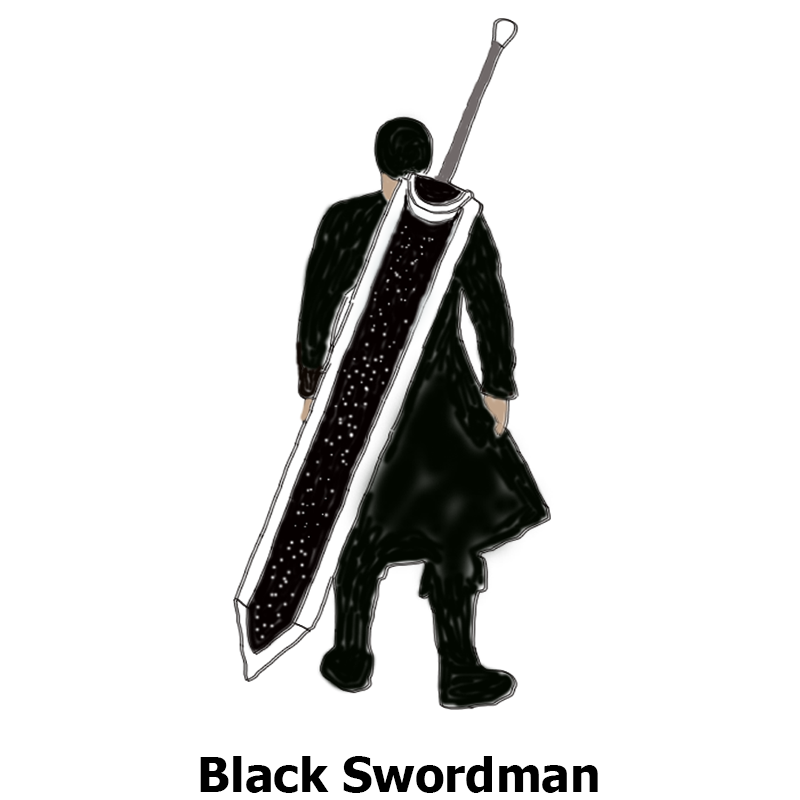
<style>
.page{position:relative;width:800px;height:800px;background:#ffffff}
.page>*{position:absolute;margin:0}
.t1{font:48px "Tahoma-Bold";color:#000000}
</style>
<div class="page">
<p class="t1" style="left:200px;top:756px;width:398px;height:37px">Black Swordman</p>
</div>
